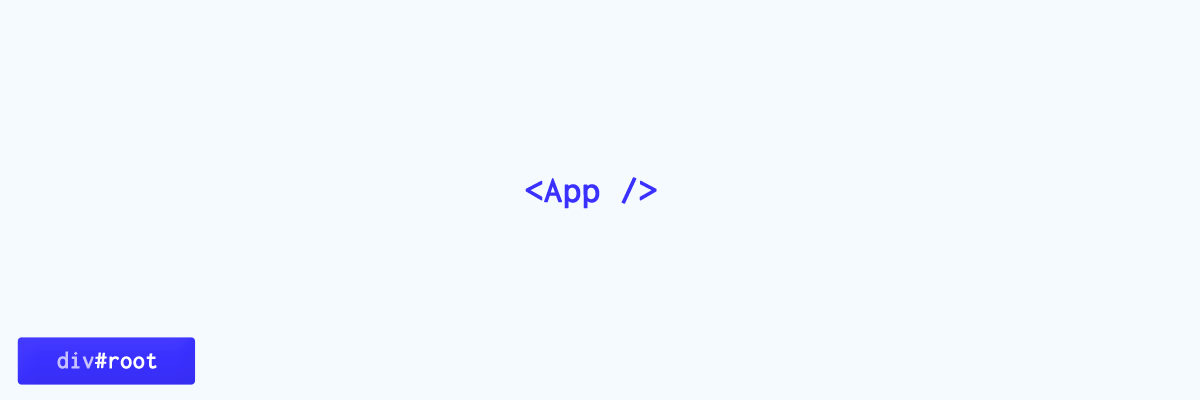
<style>
.page{position:relative;width:1200px;height:400px;background:#f5faff}
.page>*{position:absolute;margin:0}
.t1{font:36px "Inconsolata";color:#3a30ff;font-weight:bold}
.t2{font:24px "Inconsolata";color:#ffffff;font-weight:bold}
.t3{font:24px "Inconsolata";color:#c7c2ff;font-weight:bold}
</style>
<div class="page">
<p class="t1" style="left:525px;top:177px;width:132px;height:32px">&lt;App /&gt;</p>
<p class="t2" style="left:57px;top:351px;width:100px;height:18px"><span class="t3">div</span>#root</p>
</div>
